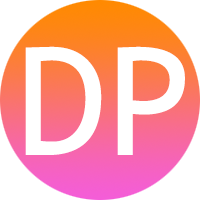
<style>
.page{position:relative;width:200px;height:200px;background:#ffffff}
.page>*{position:absolute;margin:0}
.t1{font:150px "TrebuchetMS";color:#ffffff}
</style>
<div class="page">
<p class="t1" style="left:25px;top:46px;width:160px;height:109px">DP</p>
</div>
